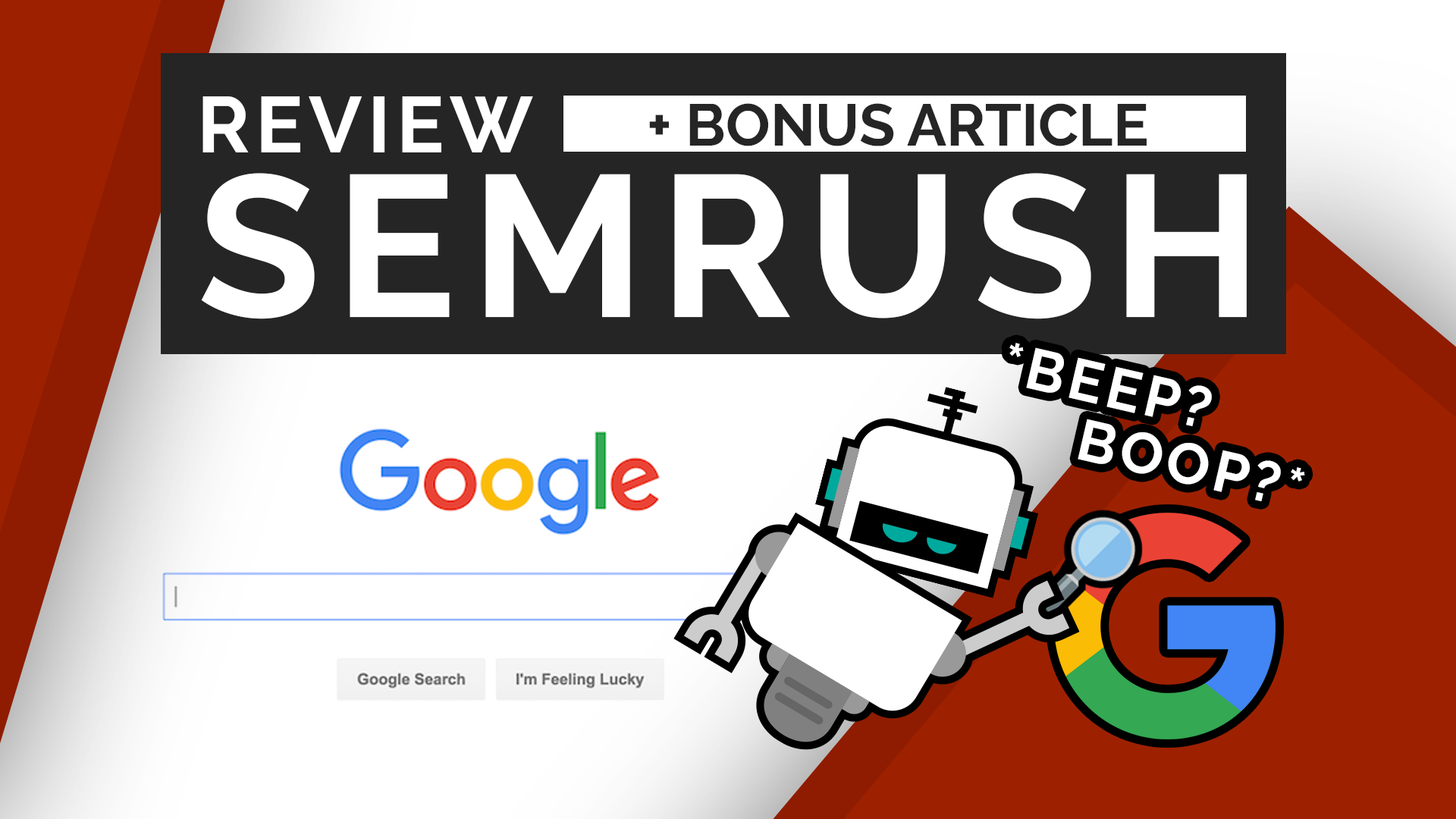
<style>
.page{position:relative;width:1456px;height:819px;background:#ffffff}
.page>*{position:absolute;margin:0}
.t1{font:78.9px "Raleway-Bold";letter-spacing:0.075em;color:#ffffff;text-transform:uppercase}
.t2{font:58.9px "Raleway-Bold";color:#252525;text-transform:uppercase}
.t3{font:201px "Raleway-Bold";letter-spacing:0.075em;color:#ffffff;text-transform:uppercase}
.t4{font:57.6px/57.6px "Raleway-Bold";letter-spacing:0.075em;color:#ffffff;text-transform:uppercase}
</style>
<div class="page">
<p class="t1" style="left:202px;top:96px;width:331px;height:56px">Review</p>
<p class="t2" style="left:649px;top:103px;width:498px;height:43px">+ Bonus article</p>
<p class="t3" style="left:201px;top:173px;width:1046px;height:146px">SEMRUSH</p>
<p class="t4" style="left:1009px;top:343px;width:296px;height:158px;rotate:13deg">*Beep?<br>     Boop?*</p>
</div>
